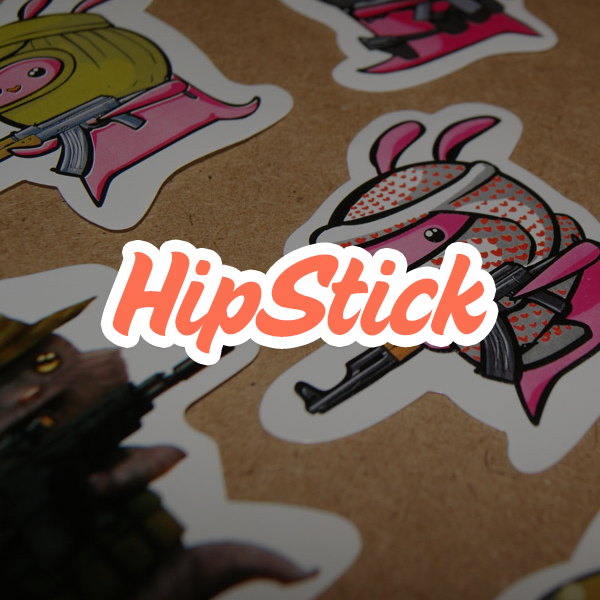
<style>
.page{position:relative;width:600px;height:600px}
.page>*{position:absolute;margin:0}
.t1{font:100px "SugarPie";color:#fc6f51}
</style>
<div class="page">
<p class="t1" style="left:112px;top:251px;width:375px;height:103px">HipStick</p>
</div>
